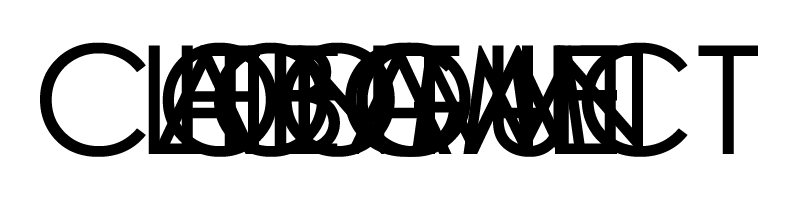
<style>
.page{position:relative;width:800px;height:200px;background:#ffffff}
.page>*{position:absolute;margin:0}
.t1{font:151px "CenturyGothic";color:#000000}
</style>
<div class="page">
<p class="t1" style="left:40px;top:42px;width:718px;height:115px">CONTACT</p>
<p class="t1" style="left:153px;top:42px;width:487px;height:115px">ABOUT</p>
<p class="t1" style="left:181px;top:42px;width:437px;height:115px">HOME</p>
</div>
